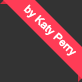
<style>
.page{position:relative;width:82px;height:82px;background:#333333}
.page>*{position:absolute;margin:0}
.t1{font:10.9px "ArialMT";letter-spacing:-0.02em;color:#ffffff;font-weight:bold}
</style>
<div class="page">
<p class="t1" style="left:23px;top:4px;width:53px;height:52px;rotate:44deg">by Katy Perry</p>
</div>
